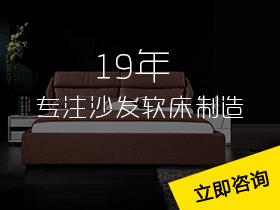
<style>
.page{position:relative;width:280px;height:210px}
.page>*{position:absolute;margin:0}
.t1{font:36px "RTWSYueGoTrial-ExLight";color:#ffffff}
.t2{font:24px "RTWSYueGoTrial-ExLight";letter-spacing:0.1em;color:#ffffff}
</style>
<div class="page">
<p class="t1" style="left:97px;top:49px;width:73px;height:34px">19年</p>
<p class="t2" style="left:37px;top:95px;width:206px;height:24px">专注沙发软床制造</p>
</div>
